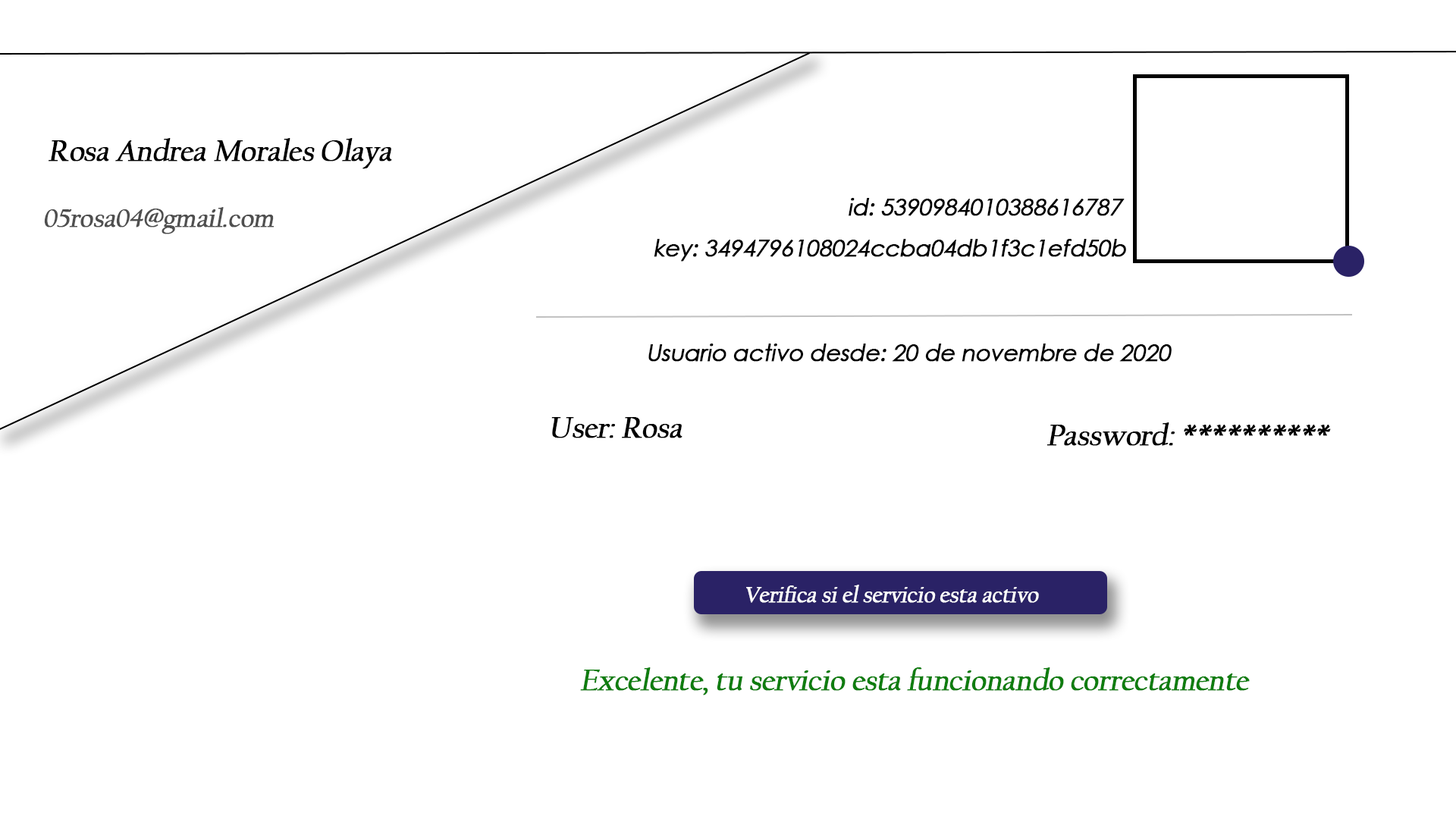
<style>
.page{position:relative;width:1456px;height:819px;background:#ffffff}
.page>*{position:absolute;margin:0}
.t1{font:30.3px "CalifornianFB-Reg";letter-spacing:-0.025em;color:#000000;font-weight:bold;font-style:italic}
.t2{font:22.7px "CenturyGothic";letter-spacing:-0.025em;color:#000000;font-weight:bold;font-style:italic}
.t3{font:26.5px "CalifornianFB-Reg";letter-spacing:-0.025em;color:#4f4f4f;font-weight:bold;font-style:italic}
.t4{font:22.7px "CalifornianFB-Reg";letter-spacing:-0.025em;color:#ffffff;font-weight:bold;font-style:italic}
.t5{font:30.3px "CalifornianFB-Reg";letter-spacing:-0.025em;color:#0f7d0f;font-weight:bold;font-style:italic}
</style>
<div class="page">
<p class="t1" style="left:49px;top:138px;width:343px;height:31px">Rosa Andrea Morales Olaya</p>
<p class="t2" style="left:849px;top:198px;width:276px;height:18px">id: 5390984010388616787</p>
<p class="t3" style="left:44px;top:207px;width:230px;height:27px">05rosa04@gmail.com</p>
<p class="t2" style="left:654px;top:239px;width:472px;height:23px">key: 3494796108024ccba04db1f3c1efd50b</p>
<p class="t2" style="left:648px;top:344px;width:524px;height:18px">Usuario activo desde: 20 de novembre de 2020</p>
<p class="t1" style="left:551px;top:417px;width:131px;height:21px">User: Rosa</p>
<p class="t1" style="left:1046px;top:422px;width:285px;height:24px">Password: **********</p>
<p class="t4" style="left:746px;top:585px;width:293px;height:18px">Verifica si el servicio esta activo</p>
<p class="t5" style="left:580px;top:667px;width:670px;height:28px">Excelente, tu servicio esta funcionando correctamente</p>
</div>
